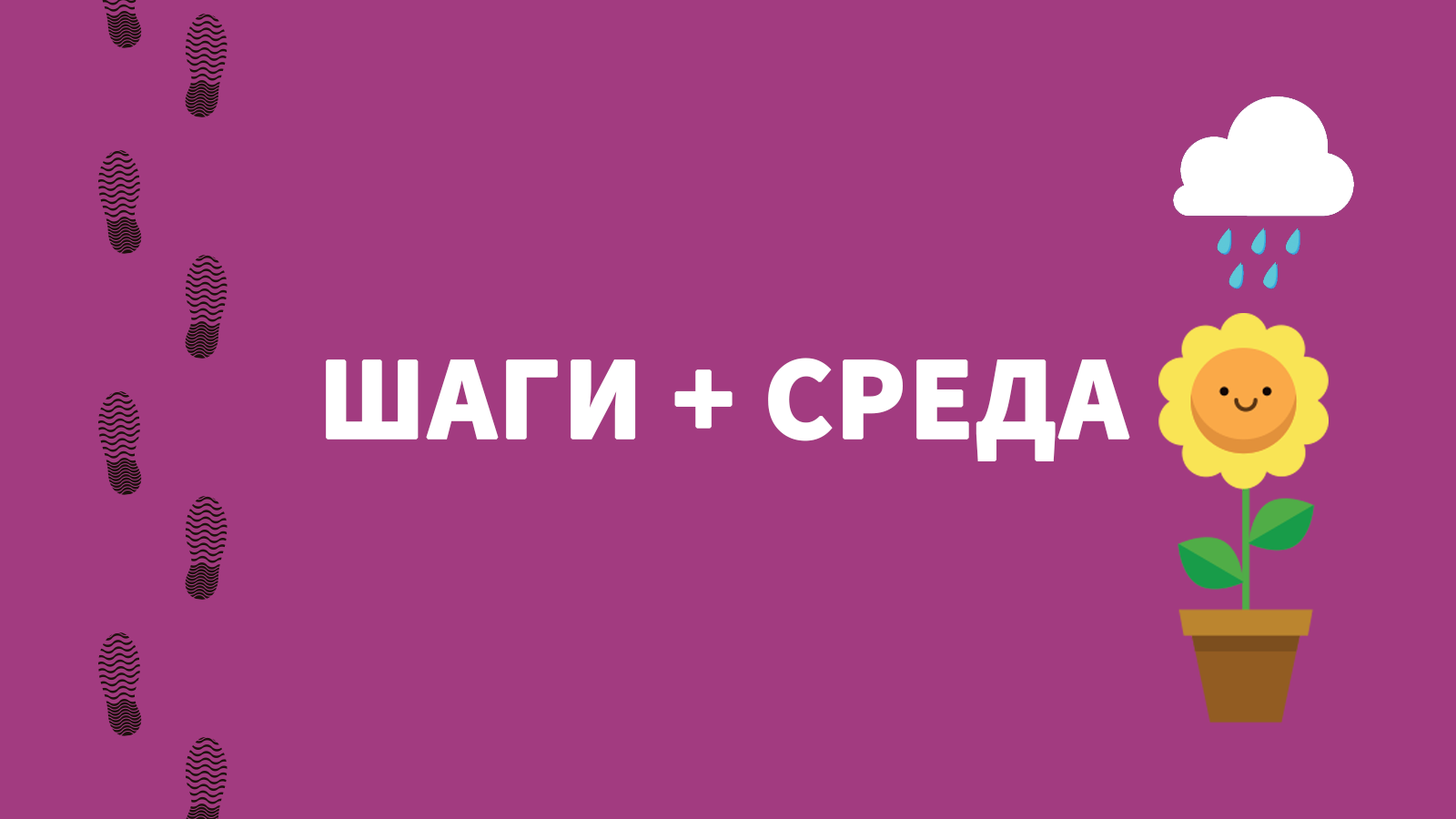
<style>
.page{position:relative;width:1456px;height:819px;background:#a23b80}
.page>*{position:absolute;margin:0}
.t1{font:117.4px "SourceSansPro-Bold";color:#ffffff;text-transform:uppercase;font-weight:bold}
</style>
<div class="page">
<p class="t1" style="left:326px;top:358px;width:804px;height:103px">шаги + среда</p>
</div>
